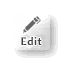
<style>
.page{position:relative;width:64px;height:64px;background:#ffffff}
.page>*{position:absolute;margin:0}
.t1{font:11px "AmiraParadiso";letter-spacing:0.05em;color:#424242}
</style>
<div class="page">
<p class="t1" style="left:21px;top:37px;width:21px;height:8px">Edit</p>
</div>
